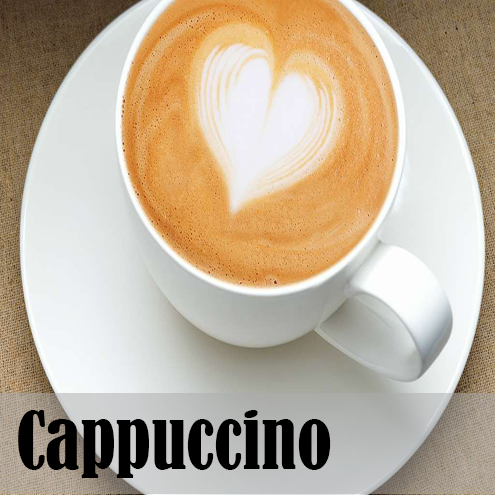
<style>
.page{position:relative;width:495px;height:495px}
.page>*{position:absolute;margin:0}
.t1{font:72.5px "BernardMT-Condensed";color:#000000}
</style>
<div class="page">
<p class="t1" style="left:18px;top:410px;width:313px;height:68px">Cappuccino</p>
</div>
